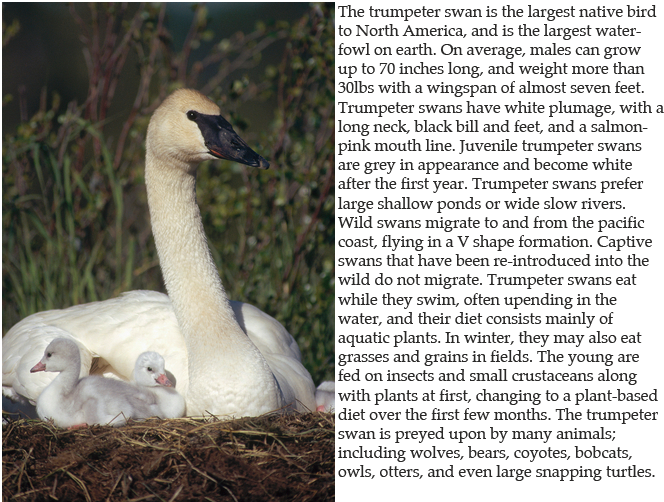
<style>
.page{position:relative;width:664px;height:502px;background:#ffffff}
.page>*{position:absolute;margin:0}
.t1{font:16px "Palatino-Roman";color:#292827}
</style>
<div class="page">
<p class="t1" style="left:338px;top:5px;width:326px;height:476px">The trumpeter swan is the largest native bird to North America, and is the largest waterfowl on earth. On average, males can grow up to 70 inches long, and weight more than 30lbs with a wingspan of almost seven feet. Trumpeter swans have white plumage, with a long neck, black bill and feet, and a salmon-pink mouth line. Juvenile trumpeter swans are grey in appearance and become white after the first year. Trumpeter swans prefer large shallow ponds or wide slow rivers. Wild swans migrate to and from the pacific coast, flying in a V shape formation. Captive swans that have been re-introduced into the wild do not migrate. Trumpeter swans eat while they swim, often upending in the water, and their diet consists mainly of aquatic plants. In winter, they may also eat grasses and grains in fields. The young are fed on insects and small crustaceans along with plants at first, changing to a plant-based diet over the first few months. The trumpeter swan is preyed upon by many animals; including wolves, bears, coyotes, bobcats, owls, otters, and even large snapping turtles.</p>
</div>
